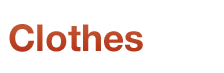
<style>
.page{position:relative;width:224px;height:73px;background:#ffffff}
.page>*{position:absolute;margin:0}
.t1{font:37px "Helvetica75-Bold";color:#ba4325}
</style>
<div class="page">
<p class="t1" style="left:9px;top:24px;width:134px;height:28px">Clothes</p>
</div>
